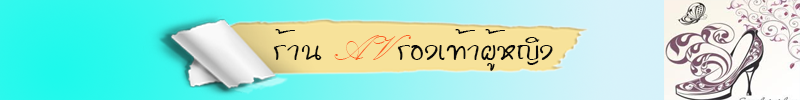
<style>
.page{position:relative;width:800px;height:100px}
.page>*{position:absolute;margin:0}
.t1{font:36px "DSUFreeHand";color:#090909}
.t2{font:36px "KunstlerScript";color:#fa6124}
</style>
<div class="page">
<p class="t1" style="left:273px;top:29px;width:280px;height:42px">ร้าน <span class="t2">AV </span>รองเท้าผู้หญิง</p>
</div>
